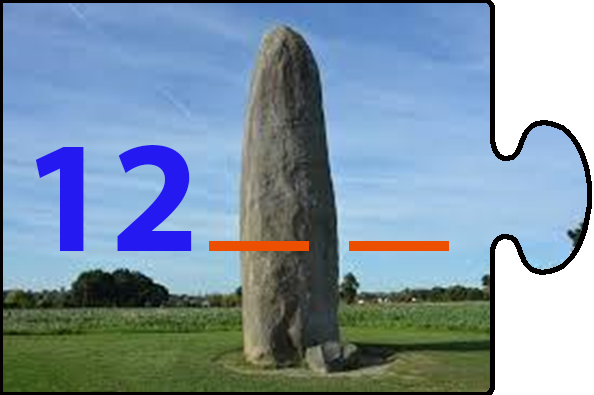
<style>
.page{position:relative;width:594px;height:395px}
.page>*{position:absolute;margin:0}
.t1{font:160px "MyriadPro-Bold";color:#241af1}
.t2{font:200px "MyriadPro-Bold";color:#ed4f01}
</style>
<div class="page">
<p class="t1" style="left:35px;top:145px;width:157px;height:106px">12</p>
<p class="t2" style="left:209px;top:241px;width:240px;height:10px">_ _</p>
</div>
